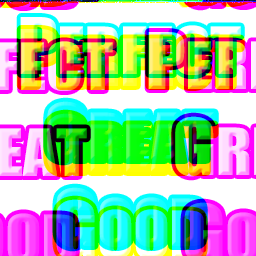
<style>
.page{position:relative;width:256px;height:256px;background:#ffffff}
.page>*{position:absolute;margin:0}
.t1{font:60px "Impact";scale:1.1 1}
.t2{font:72px "Impact";scale:1.1 1}
</style>
<div class="page">
<p class="t1" style="left:20px;top:15px;width:221px;height:58px"><span class="t2">P</span>ERFECT</p>
<p class="t1" style="left:47px;top:99px;width:168px;height:61px"><span class="t2">G</span>REAT</p>
<p class="t1" style="left:56px;top:185px;width:148px;height:61px"><span class="t2">G</span>OOD</p>
</div>
